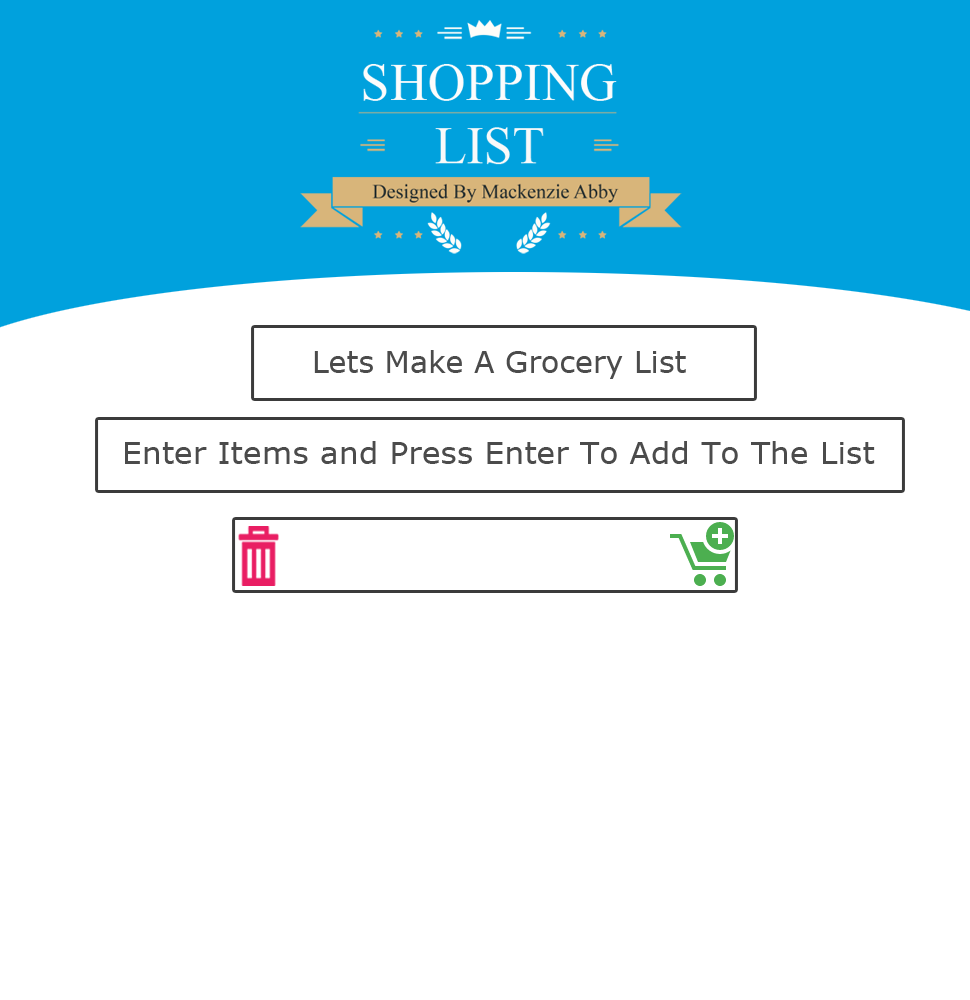
<style>
.page{position:relative;width:970px;height:1000px;background:#ffffff}
.page>*{position:absolute;margin:0}
.t1{font:30px "Verdana";color:#4b4b4b}
.t2{font:30px "Verdana";color:#4b4b4b;scale:1.05 1}
</style>
<div class="page">
<p class="t1" style="left:314px;top:350px;width:372px;height:29px">Lets Make A Grocery List</p>
<p class="t2" style="left:125px;top:441px;width:750px;height:23px">Enter Items and Press Enter To Add To The List</p>
</div>
